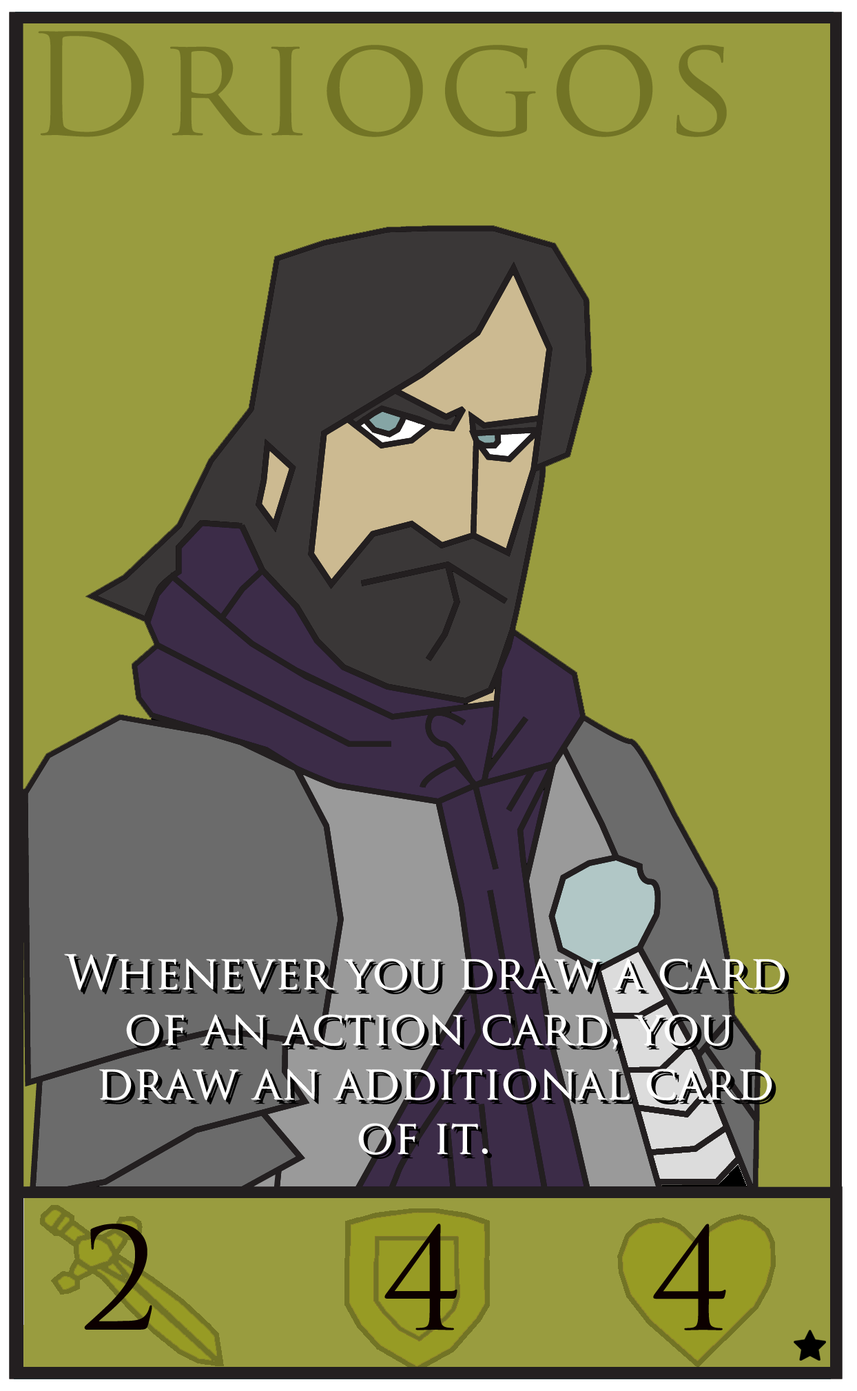
<style>
.page{position:relative;width:857px;height:1391px;background:#999c3f}
.page>*{position:absolute;margin:0}
.t1{font:45.9px "TrajanPro-Regular";color:#ffffff}
.t2{font:45.9px "TrajanPro-Regular";color:#000000}
.t3{font:51.7px "TrajanPro-Regular";color:#0c535b}
</style>
<div class="page">
<p class="t1" style="left:64px;top:954px;width:721px;height:36px">Whenever you draw a card</p>
<p class="t1" style="left:65px;top:954px;width:720px;height:37px">Whenever you draw a card</p>
<p class="t2" style="left:69px;top:958px;width:721px;height:37px">Whenever you draw a card</p>
<p class="t1" style="left:126px;top:1014px;width:606px;height:35px">of an action card, you</p>
<p class="t1" style="left:127px;top:1015px;width:605px;height:35px">of an action card, you</p>
<p class="t1" style="left:99px;top:1069px;width:673px;height:31px">draw an additional card</p>
<p class="t1" style="left:100px;top:1069px;width:672px;height:31px">draw an additional card</p>
<p class="t1" style="left:358px;top:1123px;width:129px;height:31px"><span class="t3"> </span>of it.</p>
<p class="t1" style="left:359px;top:1124px;width:129px;height:31px"><span class="t3"> </span>of it.</p>
</div>
